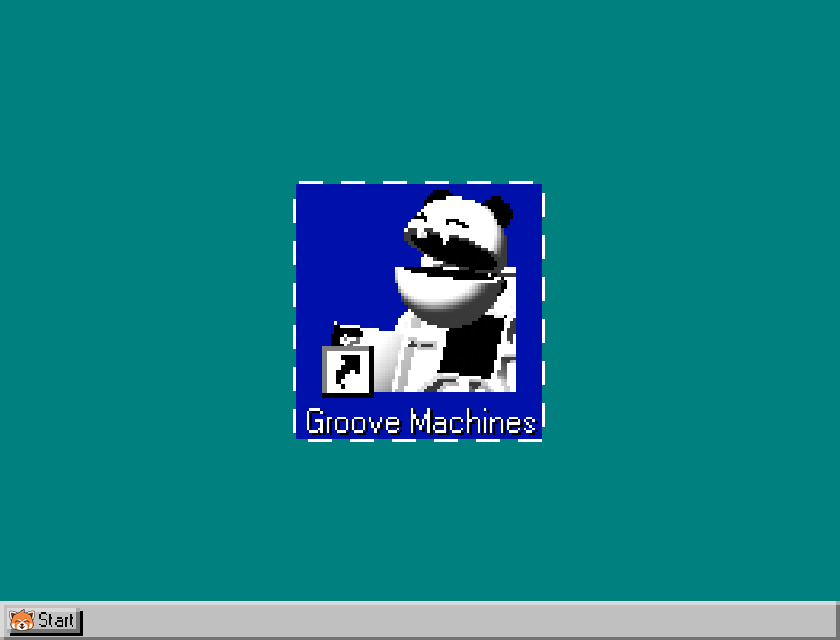
<style>
.page{position:relative;width:840px;height:640px;background:#00807f}
.page>*{position:absolute;margin:0}
.t1{font:34px "W95FARegular";color:#ffffff}
.t2{font:20.8px "W95FARegular";color:#0b0b0b}
</style>
<div class="page">
<p class="t1" style="left:307px;top:408px;width:228px;height:25px">Groove Machines</p>
<p class="t2" style="left:39px;top:612px;width:34px;height:15px">Start</p>
</div>
